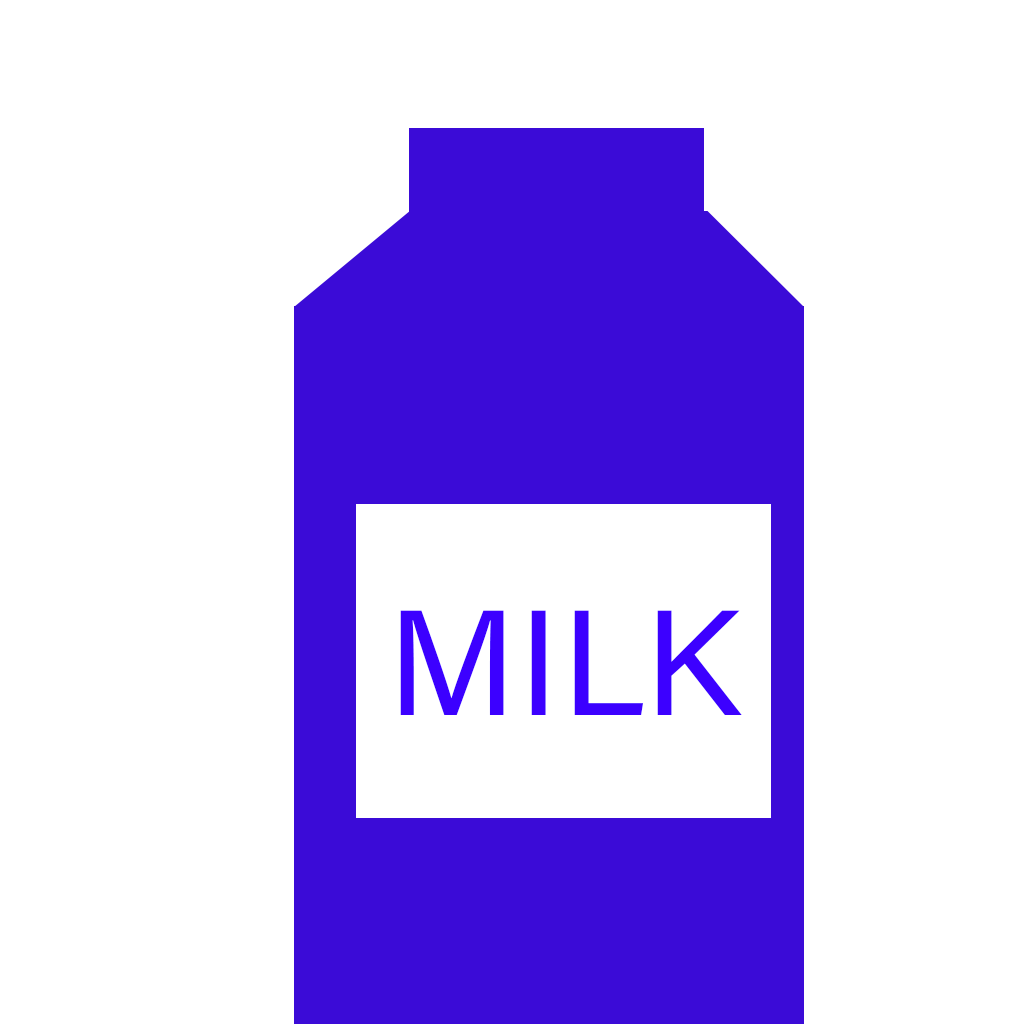
<style>
.page{position:relative;width:1024px;height:1024px;background:#ffffff}
.page>*{position:absolute;margin:0}
.t1{font:150px "AcuminConcept-Regular";color:#3c00ff}
</style>
<div class="page">
<p class="t1" style="left:400px;top:610px;width:342px;height:105px">MILK</p>
</div>
